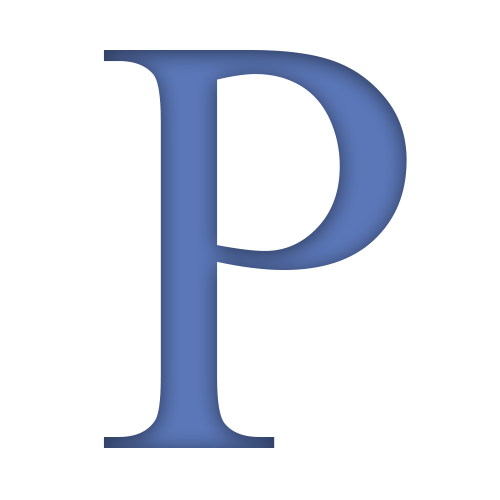
<style>
.page{position:relative;width:500px;height:500px;background:#ffffff}
.page>*{position:absolute;margin:0}
.t1{font:600px "TimesNewRomanPSMT";color:#5b77b8}
</style>
<div class="page">
<p class="t1" style="left:103px;top:50px;width:304px;height:398px">P</p>
</div>
